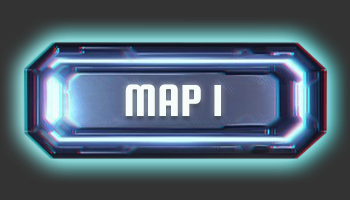
<style>
.page{position:relative;width:350px;height:200px}
.page>*{position:absolute;margin:0}
.t1{font:48px "SquadaOne-Regular";color:#f5fcfa;text-transform:uppercase}
</style>
<div class="page">
<p class="t1" style="left:125px;top:84px;width:96px;height:32px">MAP 1</p>
</div>
